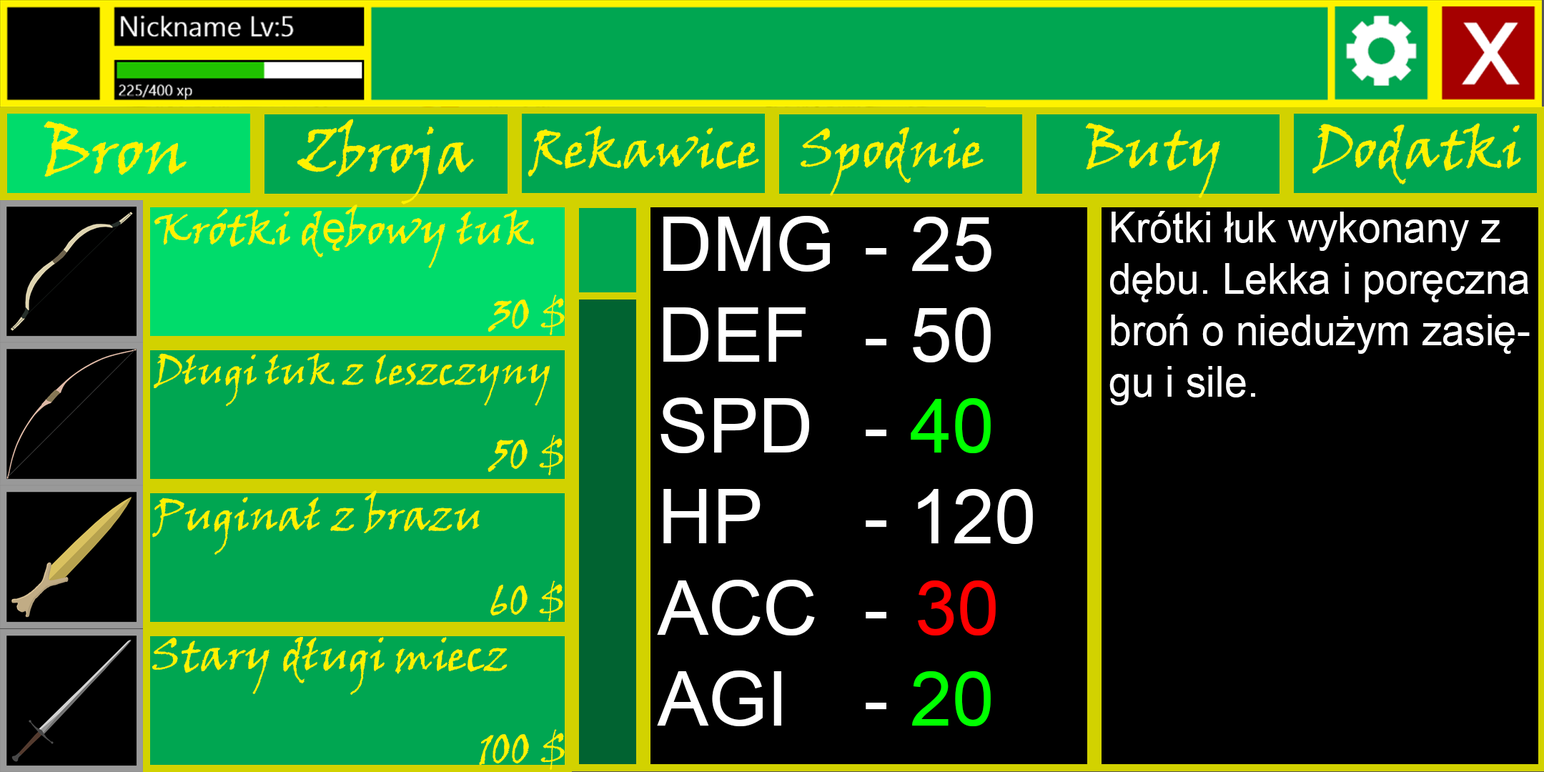
<style>
.page{position:relative;width:1544px;height:772px;background:#000000}
.page>*{position:absolute;margin:0}
.t1{font:65.8px "VinerHandITC";color:#fff200}
.t2{font:57.9px "VinerHandITC";color:#fff200}
.t3{font:51.5px "VinerHandITC";color:#fff200}
.t4{font:55.1px "VinerHandITC";color:#fff200}
.t5{font:42.9px "VinerHandITC";color:#fff200}
.t6{font:42.9px "ArialMT";color:#fff200}
.t7{font:75.8px "ArialMT";color:#ffffff}
.t8{font:75.8px "ArialMT";color:#00ff00}
.t9{font:75.8px "ArialMT";color:#ff0000}
.t10{font:42.9px "ArialMT";color:#fefefe;scale:0.95 1}
.t11{font:38.6px "VinerHandITC";color:#fff200}
</style>
<div class="page">
<p class="t1" style="left:44px;top:121px;width:143px;height:56px">Bron</p>
<p class="t2" style="left:297px;top:119px;width:177px;height:85px">Zbroja</p>
<p class="t3" style="left:528px;top:126px;width:231px;height:51px">Rekawice</p>
<p class="t4" style="left:1085px;top:123px;width:135px;height:75px">Buty</p>
<p class="t4" style="left:1313px;top:123px;width:208px;height:61px">Dodatki</p>
<p class="t3" style="left:801px;top:127px;width:183px;height:69px">Spodnie</p>
<p class="t5" style="left:154px;top:204px;width:411px;height:131px">Krótki d<span class="t6">ę</span>bowy łuk<br><br><br><br><br>                                  30 $</p>
<p class="t7" style="left:657px;top:216px;width:376px;height:510px">DMG  - 25<br>DEF   - 50<br>SPD  - <span class="t8">40<br></span>HP    - 120<br>ACC  -  <span class="t9">30<br></span>AGI   - <span class="t8">20</span></p>
<p class="t10" style="left:1110px;top:211px;width:420px;height:194px">Krótki łuk wykonany z dębu. Lekka i poręczna broń o niedużym zasięgu i sile.</p>
<p class="t11" style="left:154px;top:353px;width:409px;height:122px">Długi łuk z leszczyny<br><br><br><br><br><span class="t5">                                  50 $</span></p>
<p class="t5" style="left:152px;top:490px;width:411px;height:131px">Puginał z brazu<br><br><br><br><br>                                  60 $</p>
<p class="t5" style="left:152px;top:637px;width:413px;height:133px">Stary długi miecz<br><br><br><br><br><br>                                 100 $</p>
</div>
